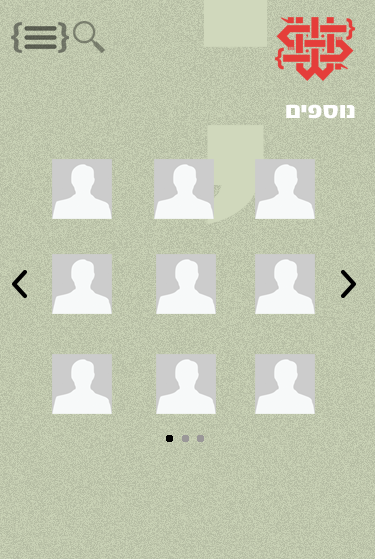
<style>
.page{position:relative;width:375px;height:559px}
.page>*{position:absolute;margin:0}
.t1{font:25px "FbScorpion-Black";color:#ffffff}
</style>
<div class="page">
<p class="t1" style="left:286px;top:104px;width:69px;height:15px">םיפסונ</p>
</div>
